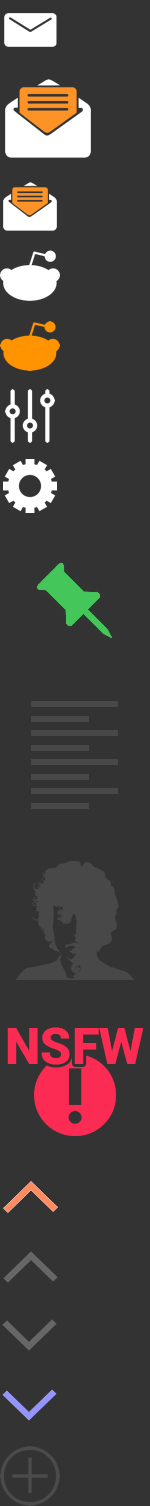
<style>
.page{position:relative;width:150px;height:1506px;background:#333333}
.page>*{position:absolute;margin:0}
.t1{font:50px "Roboto-Black";color:#fc2b53}
</style>
<div class="page">
<p class="t1" style="left:7px;top:1027px;width:137px;height:38px">NSFW</p>
</div>
